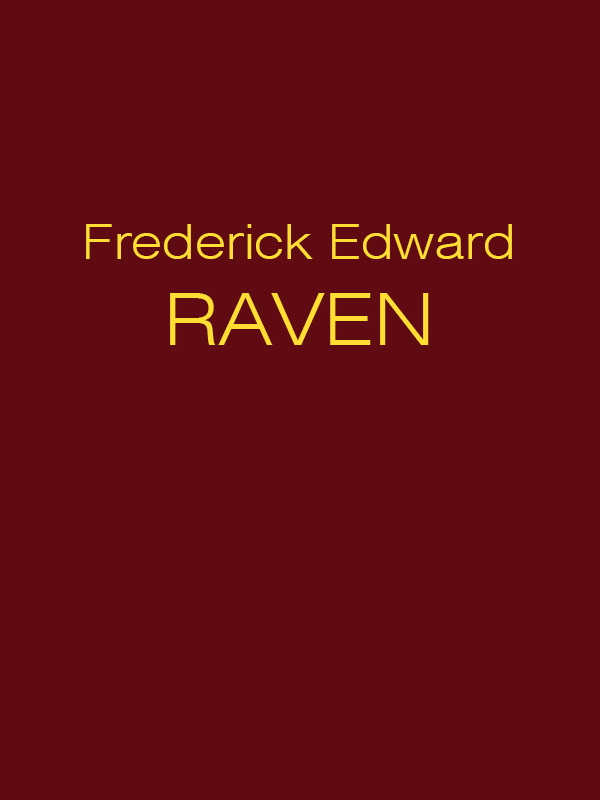
<style>
.page{position:relative;width:600px;height:800px;background:#600b11}
.page>*{position:absolute;margin:0}
.t1{font:48px "Swiss721BT-LightExtended";color:#ffdd33}
.t2{font:72px "Swiss721BT-LightExtended";color:#ffdd33}
</style>
<div class="page">
<p class="t1" style="left:86px;top:224px;width:426px;height:121px;text-align:center">Frederick Edward<br><span class="t2">RAVEN</span></p>
</div>
